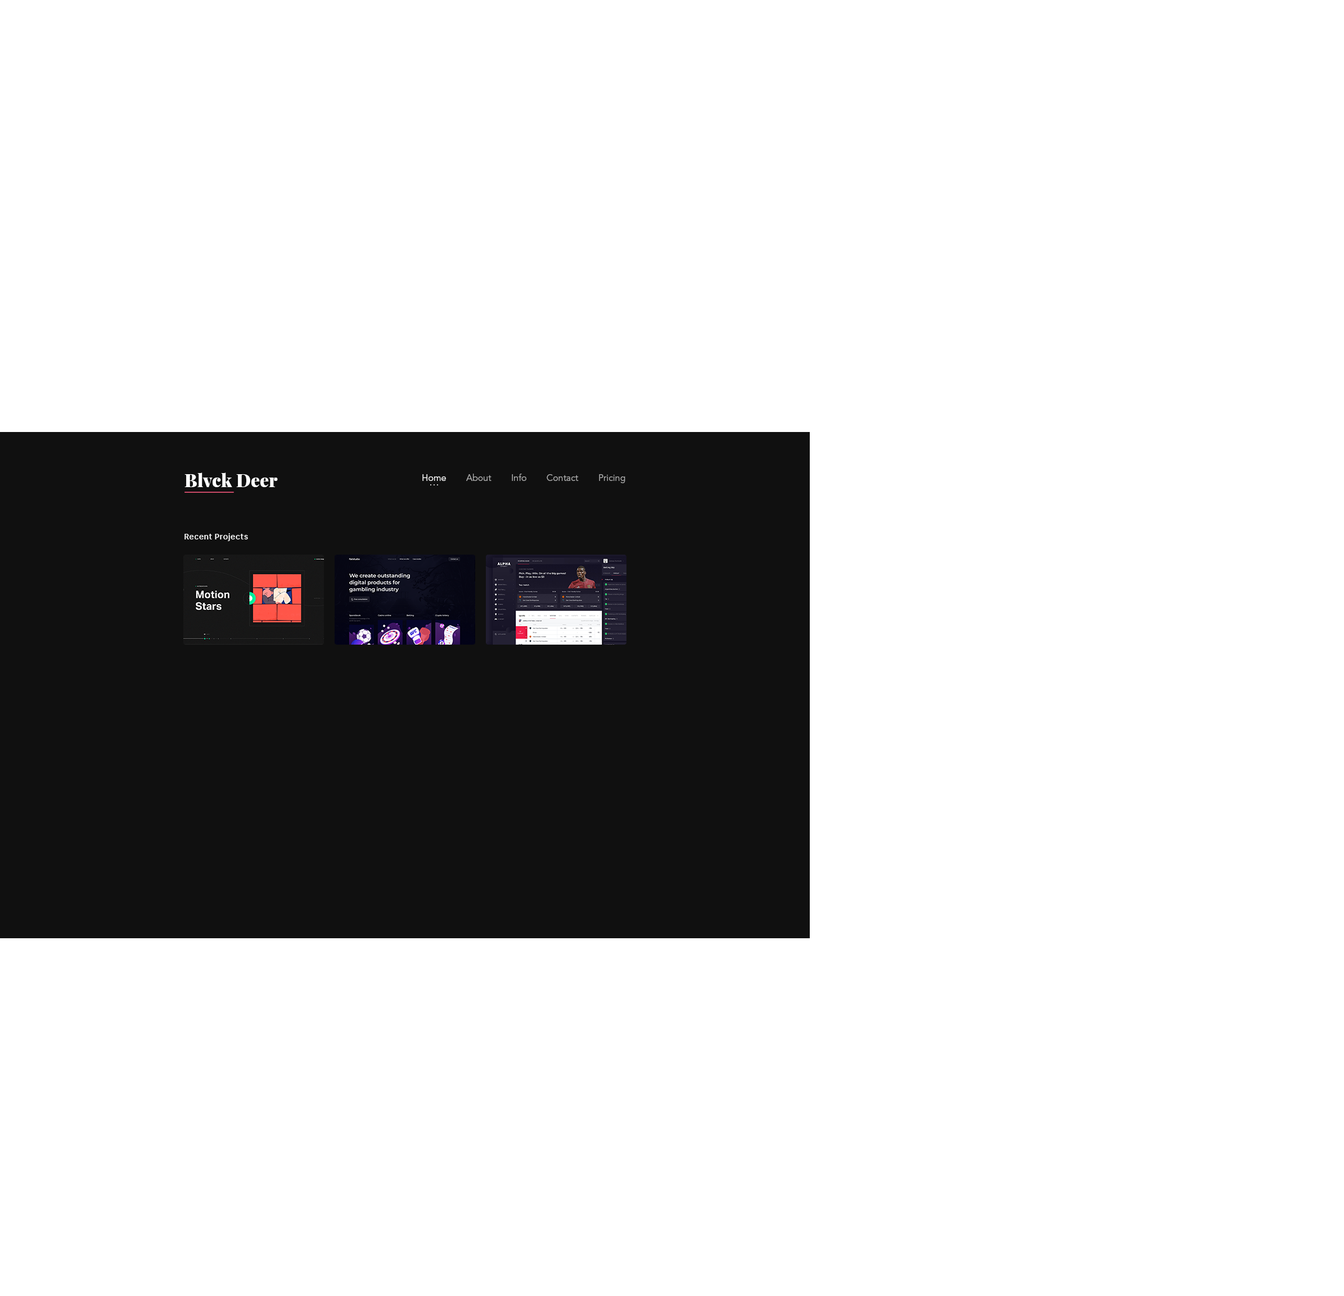
<style>
.page{position:relative;width:1344px;height:1296px;background:#ffffff}
.page>*{position:absolute;margin:0}
.t1{font:18px "PlayfairDisplay-Black";color:#ffffff}
.t2{font:9px "AvenirLTStd-Book";color:#adadad}
.t3{font:9px "AvenirLTStd-Book";color:#ffffff}
.t4{font:7.9px "AirbnbCerealApp-Medium";letter-spacing:0.05em;color:#ffffff}
</style>
<div class="page">
<p class="t1" style="left:184px;top:472px;width:94px;height:15px">Blvck Deer</p>
<p class="t2" style="left:422px;top:474px;width:204px;height:9px"><span class="t3">Home        </span>About        Info        Contact        Pricing</p>
<p class="t4" style="left:184px;top:533px;width:64px;height:8px">Recent Projects</p>
</div>
